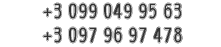
<style>
.page{position:relative;width:221px;height:47px;background:#ffffff}
.page>*{position:absolute;margin:0}
.t1{font:20px "WienInline";color:#333333}
</style>
<div class="page">
<p class="t1" style="left:42px;top:2px;width:141px;height:42px">+3 099 049 95 63<br>+3 097 96 97 478</p>
</div>
